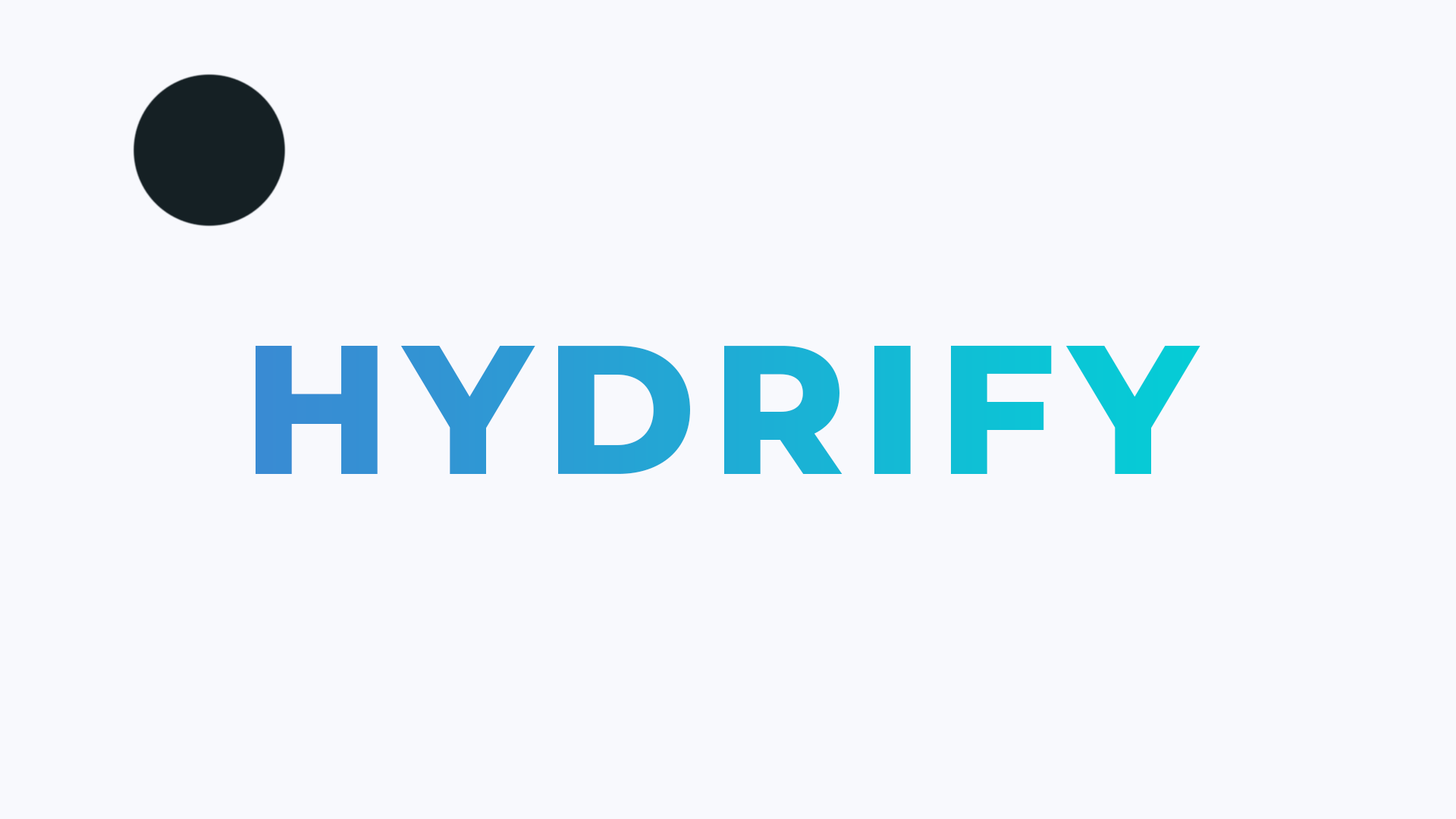
<style>
.page{position:relative;width:1456px;height:819px;background:#f8f9fd}
.page>*{position:absolute;margin:0}
.t1{font:182.9px "Montserrat-ExtraBold";letter-spacing:0.08em;text-transform:uppercase}
</style>
<div class="page">
<p class="t1" style="left:256px;top:345px;width:944px;height:129px">HYdrify</p>
</div>
